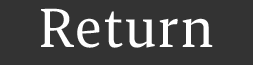
<style>
.page{position:relative;width:253px;height:65px;background:#333333}
.page>*{position:absolute;margin:0}
.t1{font:54.5px "BespokeSerif-Regular";color:#ffffff}
</style>
<div class="page">
<p class="t1" style="left:41px;top:8px;width:172px;height:40px">Return</p>
</div>
